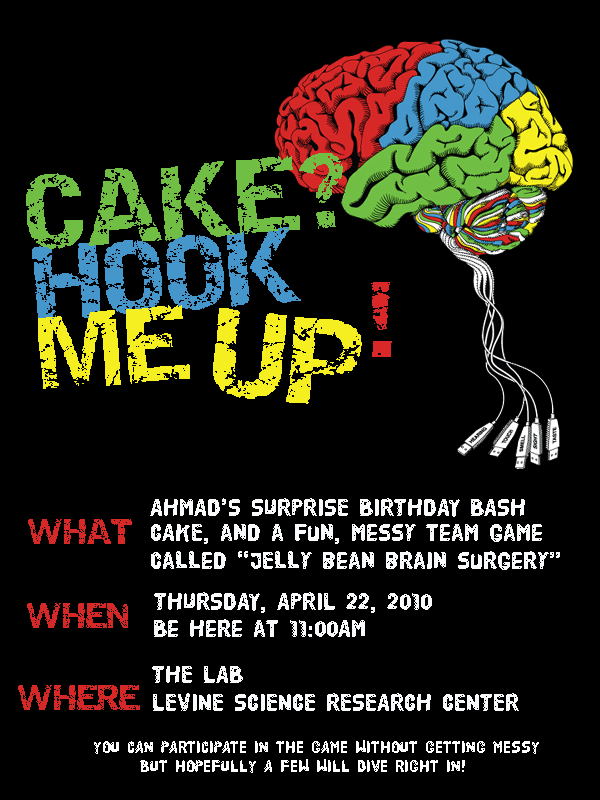
<style>
.page{position:relative;width:600px;height:800px;background:#000000}
.page>*{position:absolute;margin:0}
.t1{font:75px "Destroy";color:#71be45}
.t2{font:75px "Destroy";color:#4597cb}
.t3{font:75px "Destroy";color:#d92827}
.t4{font:75px "Destroy";color:#f5ef21}
.t5{font:86.7px "Destroy";color:#f5ef21}
.t6{font:25px "HVDPoster";color:#f8fafb}
.t7{font:25px "Destroy";color:#d72828}
.t8{font:16.7px "HVDPoster";color:#ffffff}
</style>
<div class="page">
<p class="t1" style="left:26px;top:153px;width:317px;height:96px;rotate:-4deg">CAKE?</p>
<p class="t2" style="left:32px;top:227px;width:269px;height:95px;rotate:-4deg">HOOK</p>
<p class="t3" style="left:371px;top:282px;width:21px;height:75px">!</p>
<p class="t4" style="left:38px;top:305px;width:152px;height:84px;rotate:-4deg">ME</p>
<p class="t5" style="left:213px;top:308px;width:149px;height:96px;rotate:6deg">UP</p>
<p class="t6" style="left:150px;top:498px;width:375px;height:19px">AHMAD’S SURPRISE BIRTHDAY BASH</p>
<p class="t7" style="left:28px;top:519px;width:104px;height:25px">WHAT</p>
<p class="t6" style="left:151px;top:524px;width:391px;height:20px">CAKE, and a fun, messy team game</p>
<p class="t6" style="left:151px;top:551px;width:409px;height:19px">called “JElly bean brain surgery”</p>
<p class="t6" style="left:154px;top:592px;width:278px;height:21px">THURSDAY, APRIL 22, 2010</p>
<p class="t7" style="left:27px;top:603px;width:101px;height:25px">WHEN</p>
<p class="t6" style="left:154px;top:619px;width:211px;height:18px">Be Here at 11:00AM</p>
<p class="t6" style="left:152px;top:666px;width:91px;height:17px">THE LAB</p>
<p class="t7" style="left:18px;top:685px;width:122px;height:25px">WHERE</p>
<p class="t6" style="left:153px;top:693px;width:366px;height:18px">LEVINE SCIENCE RESEARCH CENTER</p>
<p class="t8" style="left:94px;top:740px;width:445px;height:14px">YOU CAN PARTICIPATE IN THE GAME WITHOUT GETTING MESSY</p>
<p class="t8" style="left:140px;top:759px;width:325px;height:14px">BUT HOPEFULLY A FEW WILL DIVE RIGHT IN!</p>
</div>
